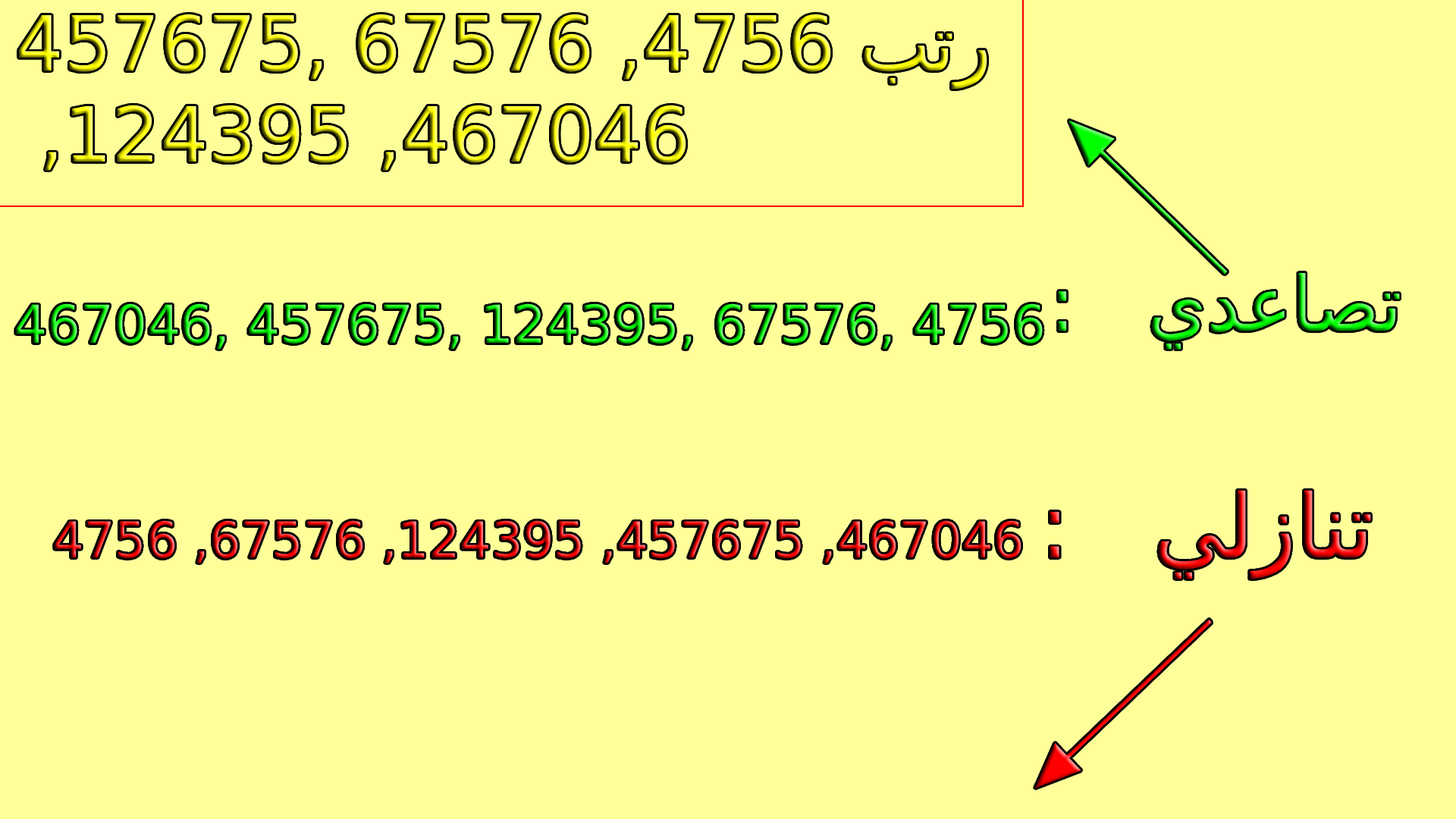
<style>
.page{position:relative;width:1456px;height:819px;background:#ffff9a}
.page>*{position:absolute;margin:0}
.t1{font:75.8px "DejaVuSans"}
.t2{font:52.3px "DejaVuSans"}
.t3{font:49.3px "DejaVuSans"}
.t4{font:88px "DejaVuSans"}
</style>
<div class="page">
<p class="t1" style="left:18px;top:14px;width:969px;height:157px">رتب 4756, 67576 ,457675<br> ,124395 ,467046</p>
<p class="t1" style="left:1058px;top:273px;width:342px;height:77px">:   تصاعدي</p>
<p class="t2" style="left:16px;top:303px;width:1027px;height:47px">467046, 457675, 124395, 67576, 4756</p>
<p class="t3" style="left:55px;top:490px;width:1316px;height:89px"><span class="t4">تنازلي   : </span>467046, 457675, 124395, 67576, 4756</p>
</div>
